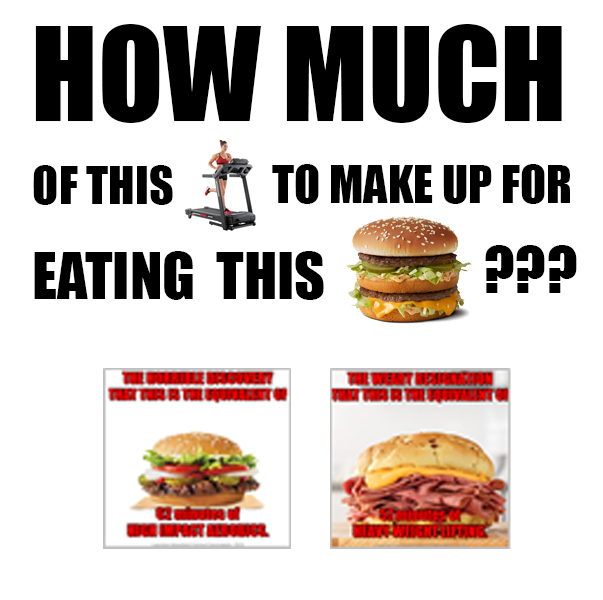
<style>
.page{position:relative;width:603px;height:600px;background:#ffffff}
.page>*{position:absolute;margin:0}
.t1{font:120px "Impact";color:#000000}
.t2{font:48px "Impact";color:#000000}
.t3{font:60px "Impact";color:#000000}
</style>
<div class="page">
<p class="t1" style="left:35px;top:24px;width:527px;height:99px">HOW MUCH</p>
<p class="t2" style="left:33px;top:165px;width:140px;height:40px">OF THIS</p>
<p class="t2" style="left:272px;top:164px;width:298px;height:40px">TO MAKE UP FOR</p>
<p class="t3" style="left:485px;top:245px;width:92px;height:48px">???</p>
<p class="t3" style="left:34px;top:251px;width:290px;height:49px">EATING  THIS</p>
</div>
